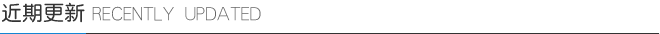
<style>
.page{position:relative;width:660px;height:34px;background:#ffffff}
.page>*{position:absolute;margin:0}
.t1{font:21px "ç»å¸ä¸­åç®-regular";color:#333333}
.t2{font:20px "ç»å¸ç»ç­çº¿ç¹-regular";color:#666666}
</style>
<div class="page">
<p class="t1" style="left:2px;top:2px;width:83px;height:21px">近期更新</p>
<p class="t2" style="left:92px;top:6px;width:169px;height:15px">RECENTLY UPDATED</p>
</div>
